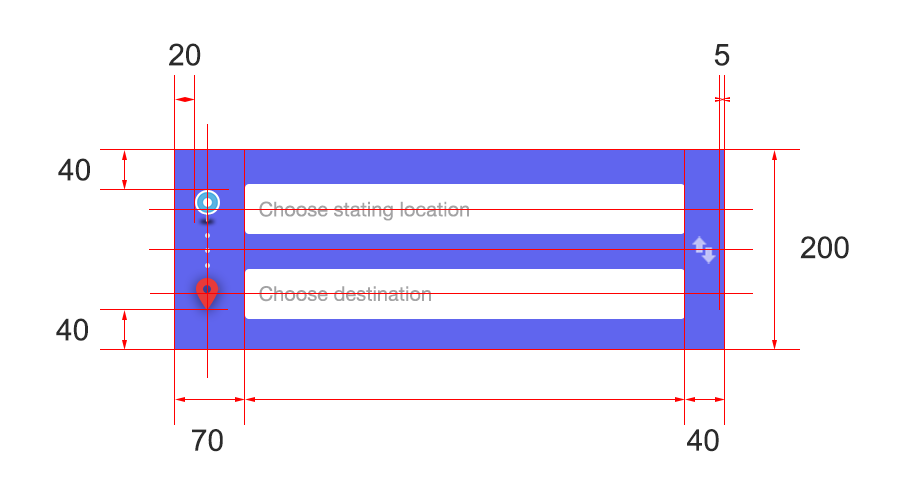
<style>
.page{position:relative;width:900px;height:500px;background:#ffffff}
.page>*{position:absolute;margin:0}
.t1{font:30px "ArialMT";color:#2b2b2b}
</style>
<div class="page">
<p class="t1" style="left:169px;top:43px;width:32px;height:23px">20</p>
<p class="t1" style="left:714px;top:44px;width:16px;height:22px">5</p>
<p class="t1" style="left:58px;top:158px;width:32px;height:23px">40</p>
<p class="t1" style="left:800px;top:236px;width:49px;height:23px">200</p>
<p class="t1" style="left:56px;top:318px;width:32px;height:23px">40</p>
<p class="t1" style="left:192px;top:429px;width:31px;height:23px">70</p>
<p class="t1" style="left:687px;top:429px;width:32px;height:23px">40</p>
</div>
